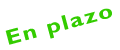
<style>
.page{position:relative;width:120px;height:50px;background:#ffffff}
.page>*{position:absolute;margin:0}
.t1{font:21.3px "GillSansMT-Bold";letter-spacing:0.06em;color:#33cc00;scale:1.17 1}
</style>
<div class="page">
<p class="t1" style="left:5px;top:8px;width:107px;height:37px;rotate:-15deg">En plazo</p>
</div>
